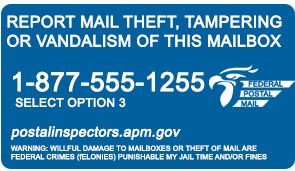
<style>
.page{position:relative;width:295px;height:171px;background:#00619e}
.page>*{position:absolute;margin:0}
.t1{font:16px "ArialMT";color:#ffffff;font-weight:bold}
.t2{font:26px "ArialMT";color:#ffffff;font-weight:bold}
.t3{font:12px "ArialMT";color:#ffffff;font-weight:bold}
.t4{font:14px "ArialMT";color:#ffffff;font-weight:bold;font-style:italic}
.t5{font:7px "ArialMT";color:#ffffff;font-weight:bold}
</style>
<div class="page">
<p class="t1" style="left:7px;top:15px;width:275px;height:32px">REPORT MAIL THEFT, TAMPERING OR VANDALISM OF THIS MAILBOX</p>
<p class="t2" style="left:13px;top:71px;width:192px;height:21px">1-877-555-1255</p>
<p class="t3" style="left:15px;top:97px;width:111px;height:11px">SELECT OPTION 3</p>
<p class="t4" style="left:11px;top:126px;width:170px;height:14px">postalinspectors.apm.gov</p>
<p class="t5" style="left:10px;top:145px;width:257px;height:16px">WARNING: WILLFUL DAMAGE TO MAILBOXES OR THEFT OF MAIL ARE FEDERAL CRIMES (fELONIES) PUNISHABLE MY JAIL TIME AND/OR FINES</p>
</div>
